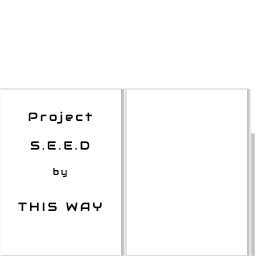
<style>
.page{position:relative;width:256px;height:256px;background:#ffffff}
.page>*{position:absolute;margin:0}
.t1{font:12px "Audiowide-Regular";letter-spacing:0.205em;color:#000000}
.t2{font:9px "Audiowide-Regular";letter-spacing:0.205em;color:#000000}
</style>
<div class="page">
<p class="t1" style="left:18px;top:111px;width:84px;height:101px;text-align:center">Project<br><br>S.E.E.D<br><br><span class="t2">by<br><br><br></span>THIS WAY</p>
</div>
